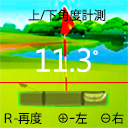
<style>
.page{position:relative;width:128px;height:128px}
.page>*{position:absolute;margin:0}
.t1{font:12.3px "KozGoPr6N-Regular";color:#000000}
.t2{font:32.5px "MicrosoftNewTaiLue";color:#ffffff}
.t3{font:16px "KozGoPr6N-Regular";color:#ffffff}
</style>
<div class="page">
<p class="t1" style="left:28px;top:9px;width:78px;height:12px">上/下角度計測</p>
<p class="t2" style="left:36px;top:48px;width:55px;height:25px">11.3</p>
<p class="t3" style="left:93px;top:50px;width:5px;height:5px">°</p>
<p class="t1" style="left:4px;top:112px;width:38px;height:12px">Ｒ-再度</p>
<p class="t1" style="left:58px;top:112px;width:66px;height:12px">⊕ｰ左　⊖右</p>
</div>
